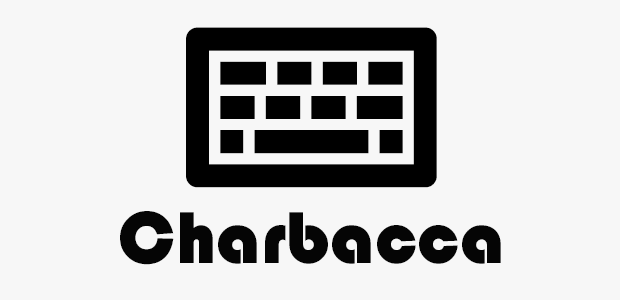
<style>
.page{position:relative;width:620px;height:300px;background:#f7f7f7}
.page>*{position:absolute;margin:0}
.t1{font:76.2px "Bauhaus93";color:#050505}
</style>
<div class="page">
<p class="t1" style="left:120px;top:211px;width:381px;height:54px">Charbacca</p>
</div>
